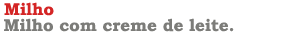
<style>
.page{position:relative;width:300px;height:50px;background:#ffffff}
.page>*{position:absolute;margin:0}
.t1{font:17px "BookmanOldStyle-Bold";color:#d42525}
.t2{font:17px "BookmanOldStyle-Bold";color:#7c7c79}
</style>
<div class="page">
<p class="t1" style="left:4px;top:2px;width:50px;height:14px">Milho</p>
<p class="t2" style="left:4px;top:18px;width:230px;height:14px">Milho com creme de leite.</p>
</div>
